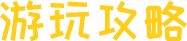
<style>
.page{position:relative;width:187px;height:41px;background:#ffffff}
.page>*{position:absolute;margin:0}
.t1{font:48px "HappyZcool-2016";color:#ffce1a}
</style>
<div class="page">
<p class="t1" style="left:0px;top:0px;width:187px;height:42px">游玩攻略</p>
</div>
